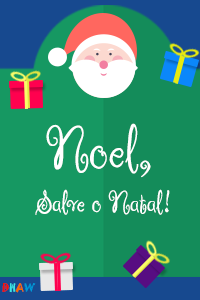
<style>
.page{position:relative;width:200px;height:300px;background:#169862}
.page>*{position:absolute;margin:0}
.t1{font:60px "RugeBoogie-Regular";color:#ffffff}
.t2{font:30px "RugeBoogie-Regular";color:#ffffff}
.t3{font:10px "Jokerman-Regular";color:#f90f00}
.t4{font:10px "Jokerman-Regular";color:#3ce5e3}
.t5{font:10px "Jokerman-Regular";color:#fa6a00}
.t6{font:10px "Jokerman-Regular";color:#0098d8}
</style>
<div class="page">
<p class="t1" style="left:46px;top:123px;width:105px;height:55px">Noel,</p>
<p class="t2" style="left:35px;top:189px;width:135px;height:26px">Salve o Natal!</p>
<p class="t3" style="left:2px;top:283px;width:34px;height:10px">D<span class="t4">H</span><span class="t5">A</span><span class="t6">W</span></p>
</div>
